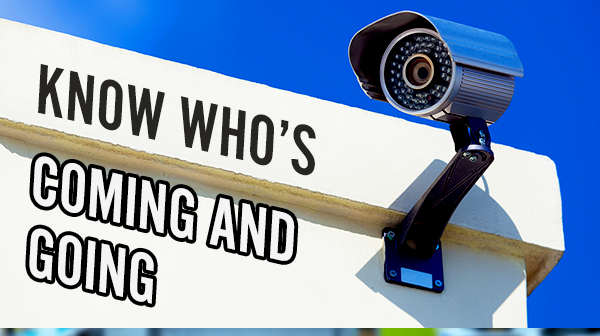
<style>
.page{position:relative;width:600px;height:336px}
.page>*{position:absolute;margin:0}
.t1{font:73.5px "AlternateGotNo2D";color:#272524;text-transform:uppercase}
.t2{font:72.3px/72.2px "AlternateGotNo2D";color:#f4f4f4;text-transform:uppercase}
</style>
<div class="page">
<p class="t1" style="left:38px;top:63px;width:278px;height:113px;rotate:13deg">KNOW who’s</p>
<p class="t2" style="left:29px;top:156px;width:266px;height:148px;rotate:13deg">coming and<br>Going</p>
</div>
